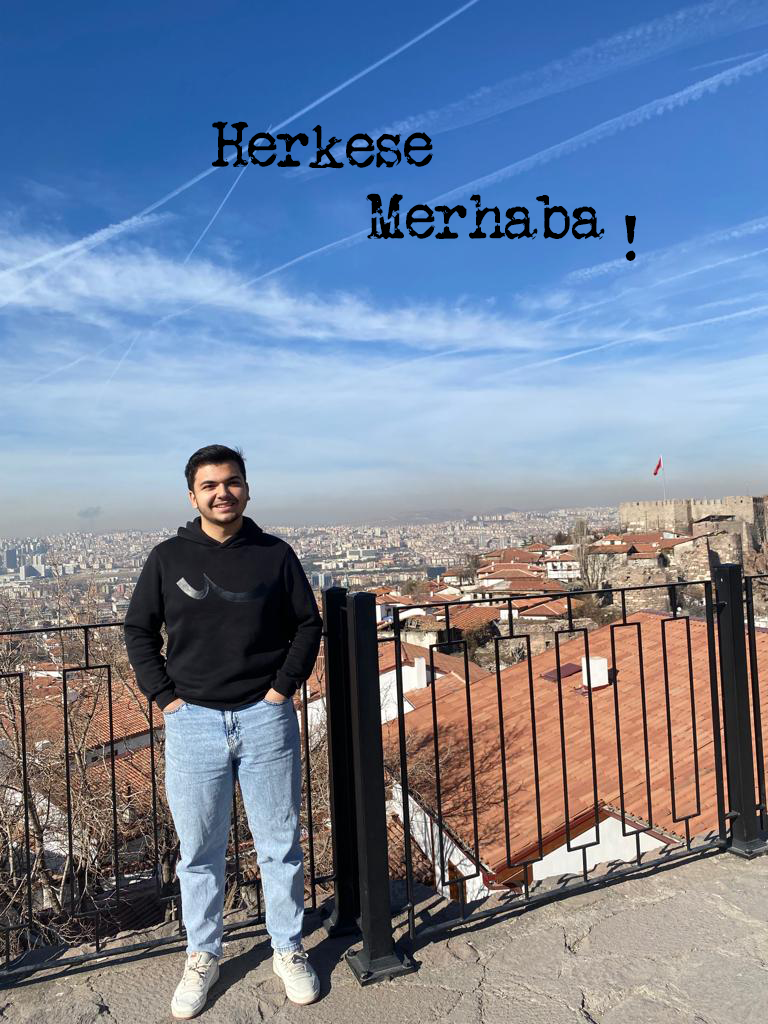
<style>
.page{position:relative;width:768px;height:1024px}
.page>*{position:absolute;margin:0}
.t1{font:65px "VeteranTypewriter";color:#000000}
</style>
<div class="page">
<p class="t1" style="left:212px;top:121px;width:37px;height:46px">H</p>
<p class="t1" style="left:308px;top:124px;width:37px;height:45px">k</p>
<p class="t1" style="left:248px;top:132px;width:30px;height:35px">e</p>
<p class="t1" style="left:276px;top:133px;width:33px;height:34px">r</p>
<p class="t1" style="left:346px;top:133px;width:30px;height:35px">e</p>
<p class="t1" style="left:376px;top:133px;width:26px;height:35px">s</p>
<p class="t1" style="left:404px;top:132px;width:30px;height:35px">e</p>
<p class="t1" style="left:365px;top:193px;width:39px;height:47px">M</p>
<p class="t1" style="left:469px;top:194px;width:37px;height:45px">h</p>
<p class="t1" style="left:536px;top:195px;width:34px;height:44px">b</p>
<p class="t1" style="left:406px;top:204px;width:30px;height:35px">e</p>
<p class="t1" style="left:434px;top:205px;width:33px;height:34px">r</p>
<p class="t1" style="left:505px;top:206px;width:33px;height:34px">a</p>
<p class="t1" style="left:572px;top:206px;width:33px;height:34px">a</p>
<p class="t1" style="left:625px;top:215px;width:11px;height:46px">!</p>
</div>
